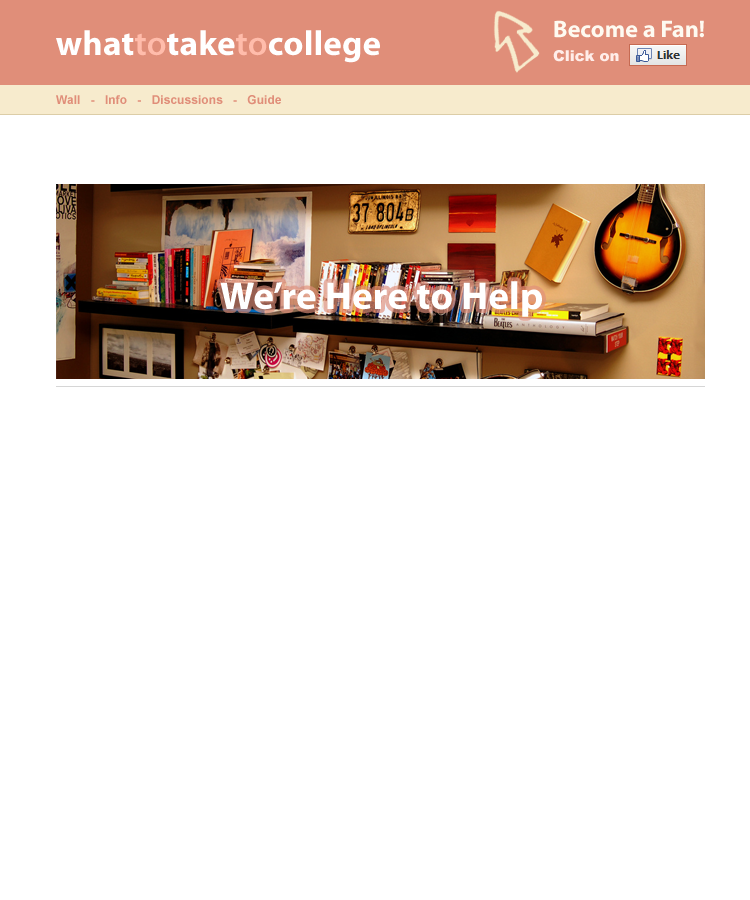
<style>
.page{position:relative;width:750px;height:900px;background:#ffffff}
.page>*{position:absolute;margin:0}
.t1{font:35px "MyriadPro-Bold";letter-spacing:0.005em;color:#ffffff}
.t2{font:35px "MyriadPro-Semibold";letter-spacing:0.005em;color:#ffbcab}
.t3{font:24px/17px "MyriadPro-Bold";color:#fefaf1}
.t4{font:15px/24px "Arial-Black";color:#ffede9}
.t5{font:12px "Arial-BoldMT";letter-spacing:0.005em;color:#e08e79}
.t6{font:39px "MyriadPro-Bold";letter-spacing:0.005em;color:#ffffff}
</style>
<div class="page">
<p class="t1" style="left:56px;top:30px;width:324px;height:33px">what<span class="t2">to</span>take<span class="t2">to</span>college</p>
<p class="t3" style="left:553px;top:20px;width:151px;height:42px">Become a Fan!<br><span class="t4">Click on</span></p>
<p class="t5" style="left:56px;top:95px;width:225px;height:10px">Wall   -   Info   -   Discussions   -   Guide</p>
<p class="t6" style="left:220px;top:281px;width:322px;height:36px">We’re Here to Help</p>
</div>
